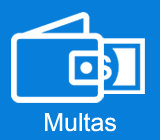
<style>
.page{position:relative;width:160px;height:140px;background:#077eda}
.page>*{position:absolute;margin:0}
.t1{font:25px "ArialMT";color:#ffffff}
</style>
<div class="page">
<p class="t1" style="left:45px;top:113px;width:71px;height:19px">Multas</p>
</div>
